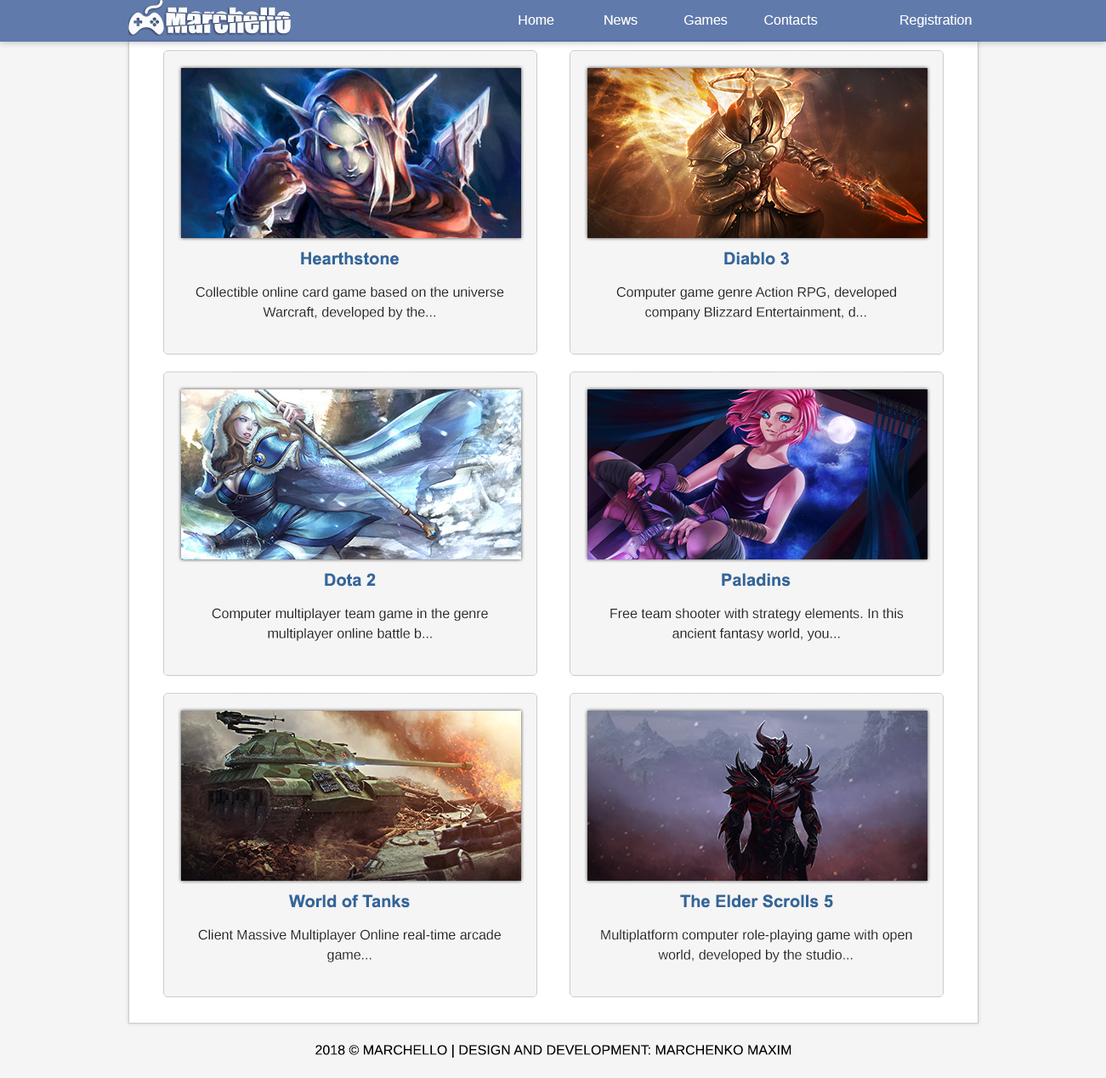
<style>
.page{position:relative;width:1106px;height:1078px;background:#f5f5f5}
.page>*{position:absolute;margin:0}
.t1{font:13.6px "WineArial";color:#ffffff}
.t2{font:17px "Arial-BoldMT";color:#336699}
.t3{font:13.6px "WineArial";color:#272727}
.t4{font:13.6px "WineArial";color:#000000}
</style>
<div class="page">
<p class="t1" style="left:519px;top:15px;width:35px;height:10px">Home</p>
<p class="t1" style="left:604px;top:15px;width:34px;height:10px">News</p>
<p class="t1" style="left:684px;top:15px;width:44px;height:10px">Games</p>
<p class="t1" style="left:764px;top:15px;width:54px;height:10px">Contacts</p>
<p class="t1" style="left:900px;top:14px;width:72px;height:13px">Registration</p>
<p class="t2" style="left:301px;top:252px;width:98px;height:13px">Hearthstone</p>
<p class="t2" style="left:724px;top:252px;width:65px;height:13px">Diablo 3</p>
<p class="t3" style="left:196px;top:287px;width:308px;height:13px">Collectible online card game based on the universe</p>
<p class="t3" style="left:616px;top:287px;width:280px;height:13px">Computer game genre Action RPG, developed</p>
<p class="t3" style="left:263px;top:307px;width:172px;height:13px">Warcraft, developed by the...</p>
<p class="t3" style="left:645px;top:307px;width:221px;height:13px">company Blizzard Entertainment, d...</p>
<p class="t2" style="left:325px;top:573px;width:51px;height:14px">Dota 2</p>
<p class="t2" style="left:722px;top:573px;width:69px;height:14px">Paladins</p>
<p class="t3" style="left:212px;top:608px;width:276px;height:13px">Computer multiplayer team game in the genre</p>
<p class="t3" style="left:610px;top:608px;width:294px;height:13px">Free team shooter with strategy elements. In this</p>
<p class="t3" style="left:268px;top:628px;width:164px;height:13px">multiplayer online battle b...</p>
<p class="t3" style="left:673px;top:628px;width:167px;height:13px">ancient fantasy world, you...</p>
<p class="t2" style="left:289px;top:894px;width:121px;height:14px">World of Tanks</p>
<p class="t2" style="left:680px;top:894px;width:153px;height:14px">The Elder Scrolls 5</p>
<p class="t3" style="left:198px;top:929px;width:303px;height:14px">Client Massive Multiplayer Online real-time arcade</p>
<p class="t3" style="left:601px;top:929px;width:311px;height:14px">Multiplatform computer role-playing game with open</p>
<p class="t3" style="left:327px;top:951px;width:45px;height:11px">game...</p>
<p class="t3" style="left:658px;top:950px;width:195px;height:12px">world, developed by the studio...</p>
<p class="t4" style="left:315px;top:1044px;width:477px;height:14px">2018 © MARCHELLO | DESIGN AND DEVELOPMENT: MARCHENKO MAXIM</p>
</div>
